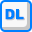
<style>
.page{position:relative;width:32px;height:32px;background:#f8f8f8}
.page>*{position:absolute;margin:0}
.t1{font:14px "Rubik-Bold";color:#0080ff;font-weight:bold}
</style>
<div class="page">
<p class="t1" style="left:5px;top:9px;width:19px;height:11px">DL</p>
</div>
